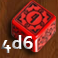
<style>
.page{position:relative;width:58px;height:58px}
.page>*{position:absolute;margin:0}
.t1{font:20px "Corbel-Bold"}
</style>
<div class="page">
<p class="t1" style="left:1px;top:35px;width:32px;height:18px">4d6</p>
</div>
